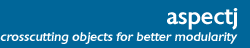
<style>
.page{position:relative;width:250px;height:48px;background:#006699}
.page>*{position:absolute;margin:0}
.t1{font:22px "Chantilly-Medium";color:#ffffff}
.t2{font:12px "Chantilly-MediumIta";color:#ffffff}
</style>
<div class="page">
<p class="t1" style="left:167px;top:8px;width:71px;height:22px">aspectj</p>
<p class="t2" style="left:0px;top:32px;width:238px;height:12px">crosscutting objects for better modularity</p>
</div>
